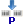
<style>
.page{position:relative;width:24px;height:24px;background:#ffffff}
.page>*{position:absolute;margin:0}
.t1{font:10px "Tahoma-Bold";color:#1304a3}
</style>
<div class="page">
<p class="t1" style="left:9px;top:17px;width:6px;height:7px">P</p>
</div>
